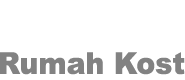
<style>
.page{position:relative;width:185px;height:80px;background:#ffffff}
.page>*{position:absolute;margin:0}
.t1{font:30.1px "Arial-Black";color:#828282;scale:0.94 1}
</style>
<div class="page">
<p class="t1" style="left:0px;top:52px;width:185px;height:23px">Rumah Kost</p>
</div>
